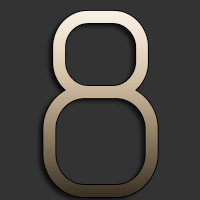
<style>
.page{position:relative;width:200px;height:200px;background:#333333}
.page>*{position:absolute;margin:0}
.t1{font:245.6px "GreyscaleBasic-Regular";scale:0.94 1}
</style>
<div class="page">
<p class="t1" style="left:43px;top:10px;width:115px;height:187px">8</p>
</div>
